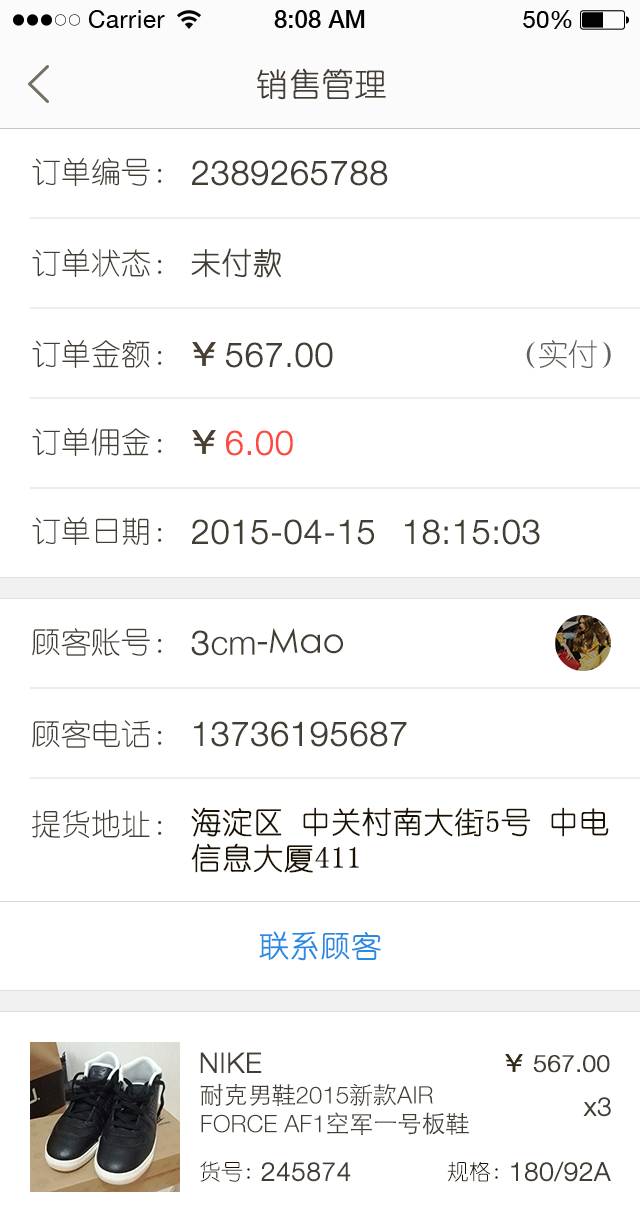
<style>
.page{position:relative;width:640px;height:1222px;background:#ffffff}
.page>*{position:absolute;margin:0}
.t1{font:32px "YouYuan";color:#433d33;text-transform:uppercase;font-weight:bold}
.t2{font:30px "YouYuan";color:#433e34;text-transform:uppercase}
.t3{font:34px "HelveticaNeueLTPro-Lt";color:#433e34;text-transform:uppercase;font-weight:bold}
.t4{font:30px "YouYuan";color:#433e34;text-transform:uppercase;font-weight:bold}
.t5{font:30px "YouYuan";color:#625e58;text-transform:uppercase}
.t6{font:34px "HelveticaNeueLTPro-Lt";color:#ff483f;text-transform:uppercase;font-weight:bold}
.t7{font:34px "STHeitiSC-Light";color:#433e34}
.t8{font:34px "HelveticaNeueLTPro-Lt";color:#433e34}
.t9{font:30px "YouYuan";color:#1b1100;text-transform:uppercase;font-weight:bold}
.t10{font:30px "YouYuan";color:#298ae4;text-transform:uppercase;font-weight:bold}
.t11{font:28px "HelveticaNeueLTPro-Lt";color:#433e34;text-transform:uppercase;font-weight:bold}
.t12{font:24px "HelveticaNeueLTPro-Lt";color:#433e34;text-transform:uppercase;font-weight:bold}
.t13{font:24px "HelveticaNeueLTPro-Lt";color:#433e34;text-transform:uppercase}
.t14{font:24px "STHeitiSC-Light";color:#433e34;text-transform:uppercase}
.t15{font:26px "HelveticaNeueLTPro-Lt";color:#433e34;font-weight:bold}
.t16{font:22px "YouYuan";color:#1b1100;text-transform:uppercase}
.t17{font:26px "HelveticaNeueLTPro-Lt";color:#433e34;text-transform:uppercase;font-weight:bold}
</style>
<div class="page">
<p class="t1" style="left:257px;top:68px;width:129px;height:32px">销售管理</p>
<p class="t2" style="left:32px;top:157px;width:130px;height:29px">订单编号：</p>
<p class="t3" style="left:192px;top:160px;width:196px;height:26px">2389265788</p>
<p class="t2" style="left:32px;top:249px;width:130px;height:28px">订单状态：</p>
<p class="t4" style="left:191px;top:248px;width:90px;height:30px">未付款</p>
<p class="t2" style="left:32px;top:340px;width:130px;height:28px">订单金额：</p>
<p class="t3" style="left:226px;top:342px;width:107px;height:26px">567.00</p>
<p class="t5" style="left:526px;top:340px;width:85px;height:29px">（实付）</p>
<p class="t2" style="left:32px;top:428px;width:130px;height:28px">订单佣金：</p>
<p class="t6" style="left:226px;top:430px;width:67px;height:26px">6.00</p>
<p class="t2" style="left:32px;top:517px;width:130px;height:28px">订单日期：</p>
<p class="t3" style="left:192px;top:519px;width:182px;height:26px">2015-04-15</p>
<p class="t3" style="left:405px;top:519px;width:135px;height:26px">18:15:03</p>
<p class="t2" style="left:32px;top:628px;width:130px;height:28px">顾客账号：</p>
<p class="t7" style="left:191px;top:628px;width:152px;height:28px"><span class="t3">3</span><span class="t8">cm</span>-Mao</p>
<p class="t2" style="left:32px;top:720px;width:130px;height:28px">顾客电话：</p>
<p class="t3" style="left:194px;top:721px;width:213px;height:26px">13736195687</p>
<p class="t2" style="left:32px;top:809px;width:130px;height:29px">提货地址：</p>
<p class="t9" style="left:191px;top:807px;width:418px;height:66px;text-align:justify">海淀区 中关村南大街5号 中电信息大厦411</p>
<p class="t10" style="left:259px;top:931px;width:122px;height:30px">联系顾客</p>
<p class="t11" style="left:200px;top:1052px;width:62px;height:21px">NIKE</p>
<p class="t12" style="left:533px;top:1055px;width:77px;height:18px">567.00</p>
<p class="t13" style="left:200px;top:1083px;width:269px;height:52px"><span class="t14">耐克男鞋</span>2015<span class="t14">新款</span>air force AF1<span class="t14">空军一号板鞋</span></p>
<p class="t15" style="left:583px;top:1097px;width:28px;height:20px">x3</p>
<p class="t16" style="left:200px;top:1161px;width:50px;height:21px">货号:</p>
<p class="t17" style="left:261px;top:1162px;width:90px;height:20px">245874</p>
<p class="t16" style="left:447px;top:1161px;width:51px;height:21px">规格:</p>
<p class="t17" style="left:511px;top:1161px;width:100px;height:21px">180/92a</p>
</div>
